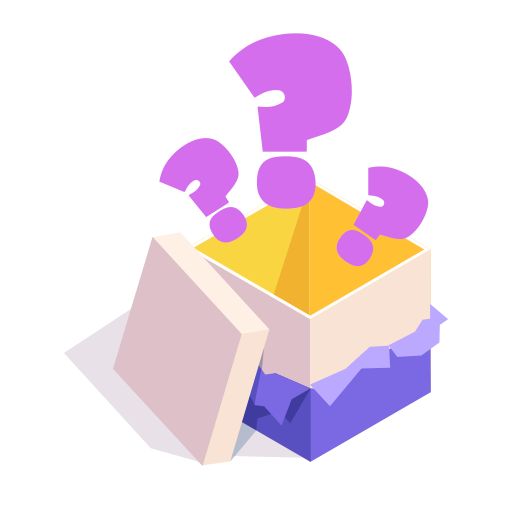
<style>
.page{position:relative;width:512px;height:512px;background:#ffffff}
.page>*{position:absolute;margin:0}
.t1{font:232.2px "Bumpo";color:#d46eed;font-weight:bold}
.t2{font:140.5px "Bumpo";color:#d46eed;font-weight:bold}
</style>
<div class="page">
<p class="t1" style="left:229px;top:33px;width:123px;height:176px">?</p>
<p class="t2" style="left:159px;top:138px;width:88px;height:105px;rotate:-32deg">?</p>
<p class="t2" style="left:336px;top:166px;width:93px;height:101px;rotate:35deg">?</p>
</div>
